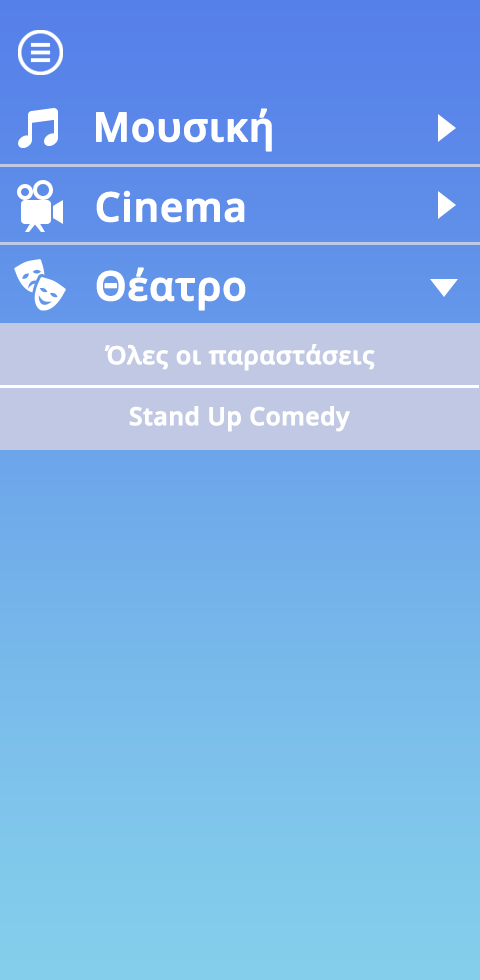
<style>
.page{position:relative;width:480px;height:980px}
.page>*{position:absolute;margin:0}
.t1{font:40px "OpenSans-SemiBold";color:#ffffff;font-weight:bold}
.t2{font:24.6px "OpenSans-SemiBold";color:#ffffff;font-weight:bold}
</style>
<div class="page">
<p class="t1" style="left:96px;top:108px;width:176px;height:44px">Μουσική</p>
<p class="t1" style="left:96px;top:190px;width:149px;height:33px">Cinema</p>
<p class="t1" style="left:96px;top:267px;width:150px;height:44px">Θέατρο</p>
<p class="t2" style="left:104px;top:344px;width:271px;height:27px">Όλες οι παραστάσεις</p>
<p class="t2" style="left:129px;top:406px;width:221px;height:26px">Stand Up Comedy</p>
</div>
